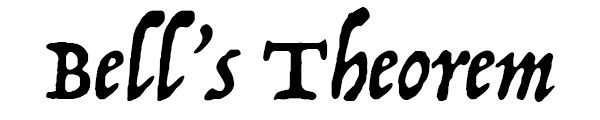
<style>
.page{position:relative;width:600px;height:120px;background:#ffffff}
.page>*{position:absolute;margin:0}
.t1{font:100px "Trattatello";color:#000000}
</style>
<div class="page">
<p class="t1" style="left:46px;top:7px;width:509px;height:95px">Bell’s Theorem</p>
</div>
